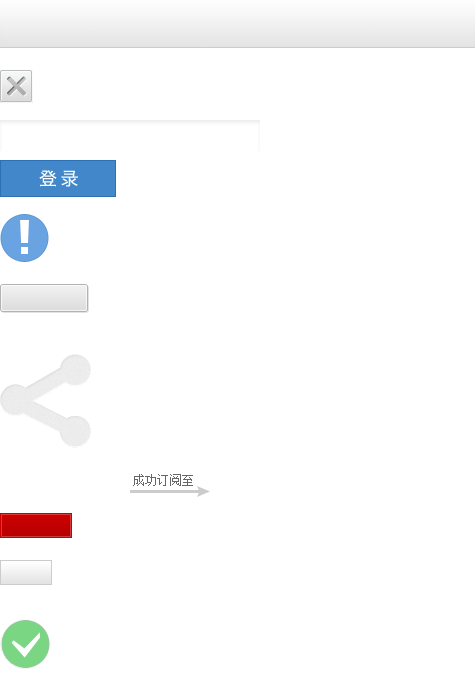
<style>
.page{position:relative;width:475px;height:680px;background:#ffffff}
.page>*{position:absolute;margin:0}
.t1{font:18px "HiraginoSansGB-W3";letter-spacing:0.2em;color:#ffffff}
.t2{font:12px "SimSun";letter-spacing:0.02em;color:#666666}
</style>
<div class="page">
<p class="t1" style="left:39px;top:170px;width:39px;height:17px">登录</p>
<p class="t2" style="left:133px;top:474px;width:60px;height:12px">成功订阅至</p>
</div>
